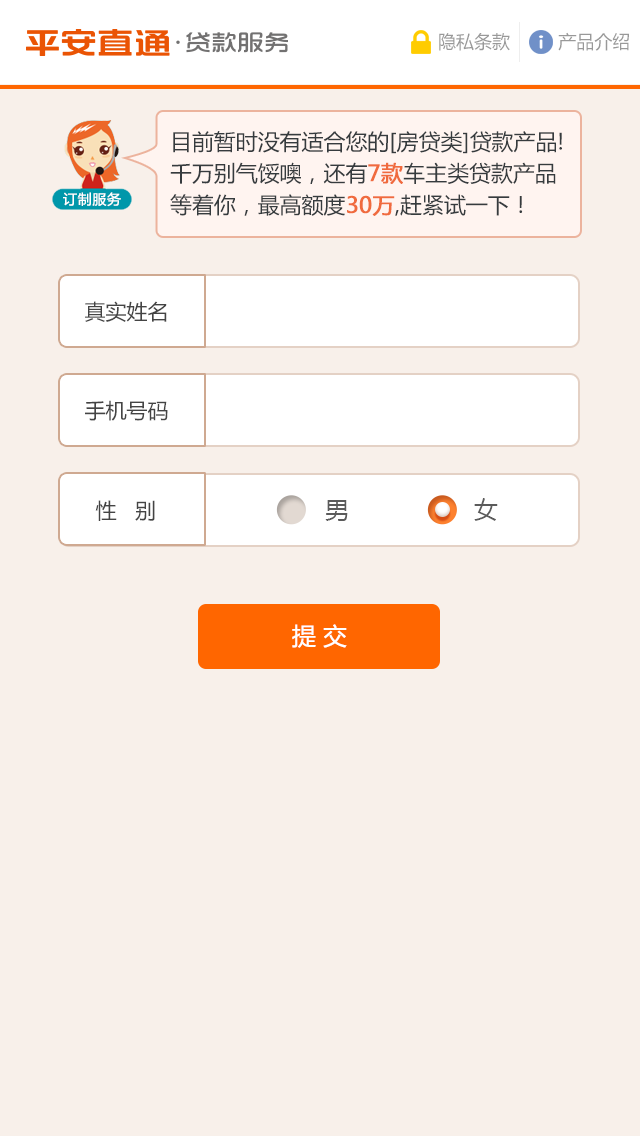
<style>
.page{position:relative;width:640px;height:1136px;background:#f8f0ea}
.page>*{position:absolute;margin:0}
.t1{font:18px "MicrosoftYaHei";color:#999999}
.t2{font:22px/31.6px "MicrosoftYaHei";color:#363b3e}
.t3{font:22px/31.6px "MicrosoftYaHei";color:#f06b3e;font-weight:bold}
.t4{font:13.8px "MicrosoftYaHei";letter-spacing:0.05em;color:#ffffff}
.t5{font:21px "MicrosoftYaHei";color:#444444}
.t6{font:24px "MicrosoftYaHei";color:#5b5b5b}
.t7{font:24px "MicrosoftYaHei";color:#ffffff}
</style>
<div class="page">
<p class="t1" style="left:439px;top:33px;width:71px;height:18px">隐私条款</p>
<p class="t1" style="left:558px;top:32px;width:71px;height:19px">产品介绍</p>
<p class="t2" style="left:170px;top:131px;width:392px;height:85px">目前暂时没有适合您的[房贷类]贷款产品!<br>千万别气馁噢，还有<span class="t3">7款</span>车主类贷款产品<br>等着你，最高额度<span class="t3">30万</span>,赶紧试一下！</p>
<p class="t4" style="left:63px;top:192px;width:58px;height:15px">订制服务</p>
<p class="t5" style="left:85px;top:301px;width:82px;height:21px">真实姓名</p>
<p class="t5" style="left:85px;top:400px;width:83px;height:21px">手机号码</p>
<p class="t5" style="left:95px;top:500px;width:60px;height:21px">性   别</p>
<p class="t6" style="left:325px;top:500px;width:23px;height:21px">男</p>
<p class="t6" style="left:474px;top:498px;width:24px;height:23px">女</p>
<p class="t7" style="left:292px;top:624px;width:55px;height:24px">提 交</p>
</div>
